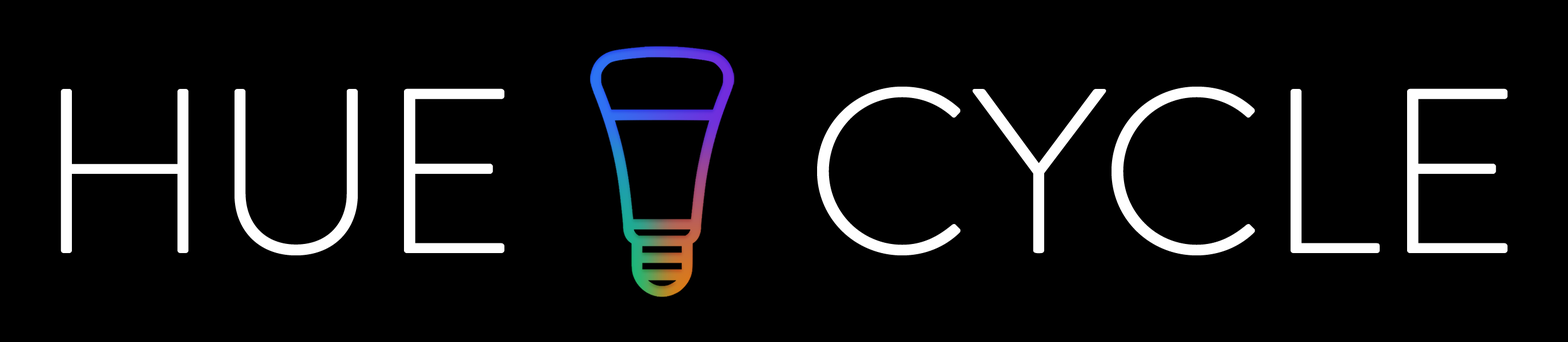
<style>
.page{position:relative;width:1568px;height:342px;background:#000000}
.page>*{position:absolute;margin:0}
.t1{font:234.9px "BrandonText-Light";color:#ffffff}
</style>
<div class="page">
<p class="t1" style="left:60px;top:87px;width:1448px;height:169px">HUE       CYCLE</p>
</div>
